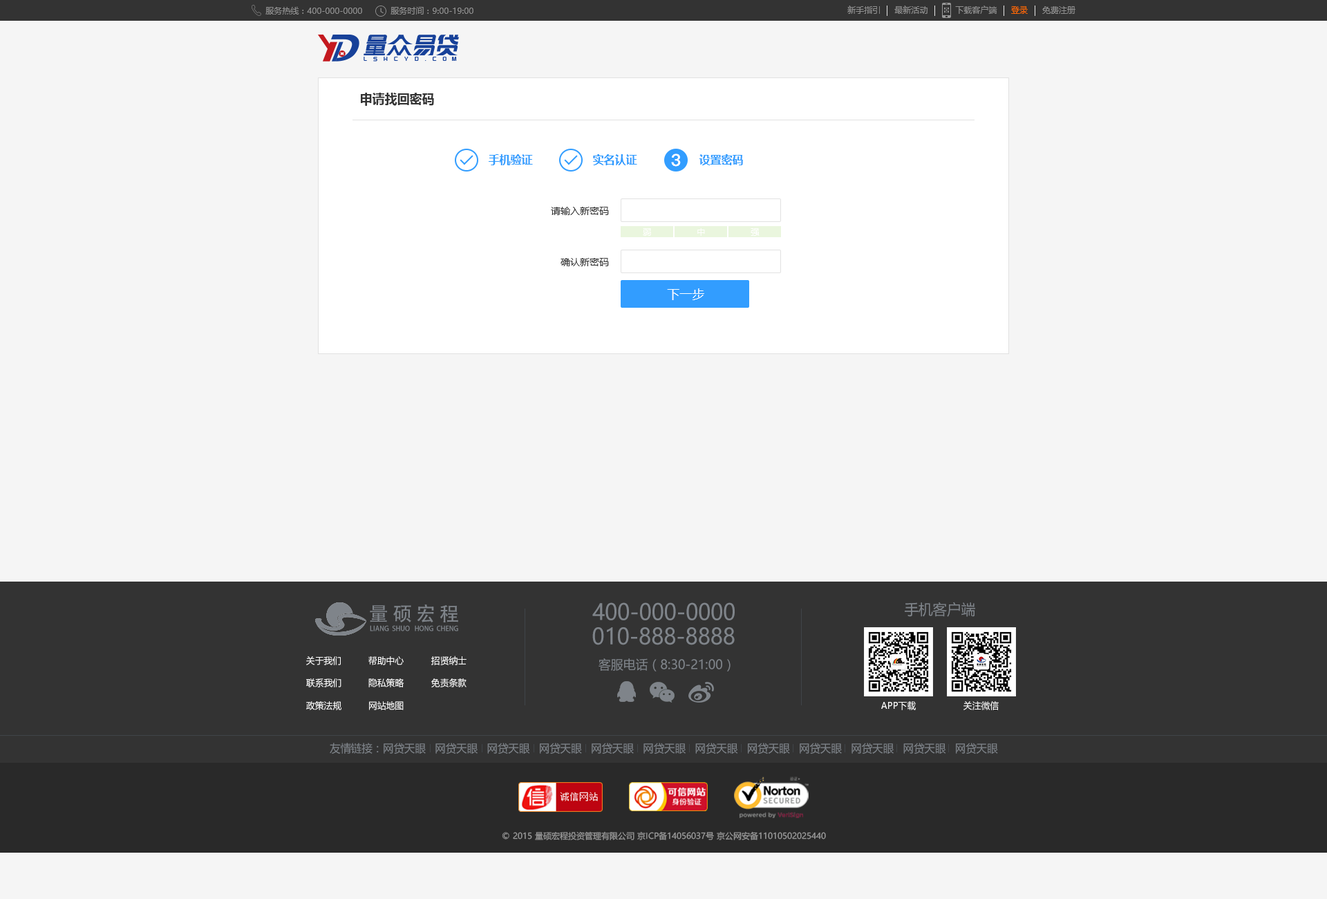
<style>
.page{position:relative;width:1327px;height:899px;background:#f5f5f5}
.page>*{position:absolute;margin:0}
.t1{font:8.3px "MicrosoftYaHei";color:#909090}
.t2{font:8.3px "MicrosoftYaHei";color:#ff6803}
.t3{font:12.4px "MicrosoftYaHei-Bold";color:#333333}
.t4{font:11.1px "MicrosoftYaHei-Bold";color:#329dff}
.t5{font:16.6px "PingFang-SC-Heavy";color:#ffffff}
.t6{font:9.7px "MicrosoftYaHei";color:#333333}
.t7{font:8.3px "MicrosoftYaHei";color:#ffffff}
.t8{font:12.4px "MicrosoftYaHei";color:#ffffff}
.t9{font:19.6px "AdobeHeitiStd-Regular";letter-spacing:0.2em;color:#7f848a}
.t10{font:22.1px "MicrosoftYaHei";color:#7f848a;scale:0.96 1}
.t11{font:14.7px "MicrosoftYaHei";color:#7f848a;scale:0.96 1}
.t12{font:7px "AdobeHeitiStd-Regular";color:#7f848a;text-transform:uppercase;scale:0.96 1}
.t13{font:9.2px "MicrosoftYaHei";color:#ffffff;scale:0.96 1}
.t14{font:12.9px "MicrosoftYaHei";color:#7f848a;scale:0.96 1}
.t15{font:11px "MicrosoftYaHei";color:#7f848a;scale:0.96 1}
.t16{font:8.3px "MicrosoftYaHei";color:#999999}
</style>
<div class="page">
<p class="t1" style="left:847px;top:6px;width:33px;height:8px">新手指引</p>
<p class="t1" style="left:894px;top:6px;width:34px;height:8px">最新活动</p>
<p class="t1" style="left:955px;top:6px;width:42px;height:8px">下载客户端</p>
<p class="t1" style="left:265px;top:7px;width:97px;height:8px">服务热线：400-000-0000</p>
<p class="t1" style="left:391px;top:7px;width:82px;height:8px">服务时间：9:00-19:00</p>
<p class="t2" style="left:1011px;top:6px;width:17px;height:8px">登录</p>
<p class="t1" style="left:1042px;top:6px;width:33px;height:8px">免费注册</p>
<p class="t3" style="left:361px;top:93px;width:73px;height:13px">申请找回密码</p>
<p class="t4" style="left:489px;top:154px;width:44px;height:11px">手机验证</p>
<p class="t4" style="left:593px;top:154px;width:44px;height:11px">实名认证</p>
<p class="t5" style="left:671px;top:153px;width:10px;height:14px">3</p>
<p class="t4" style="left:699px;top:154px;width:44px;height:11px">设置密码</p>
<p class="t6" style="left:551px;top:207px;width:58px;height:8px">请输入新密码</p>
<p class="t7" style="left:643px;top:228px;width:8px;height:8px">弱</p>
<p class="t7" style="left:697px;top:228px;width:8px;height:8px">中</p>
<p class="t7" style="left:751px;top:228px;width:9px;height:8px">强</p>
<p class="t6" style="left:561px;top:258px;width:48px;height:8px">确认新密码</p>
<p class="t8" style="left:667px;top:288px;width:37px;height:12px">下一步</p>
<p class="t9" style="left:370px;top:604px;width:88px;height:18px">量硕宏程</p>
<p class="t10" style="left:592px;top:602px;width:143px;height:18px">400-000-0000</p>
<p class="t11" style="left:905px;top:601px;width:70px;height:16px">手机客户端</p>
<p class="t12" style="left:370px;top:625px;width:88px;height:6px">Liang  Shuo   Hong  Cheng</p>
<p class="t10" style="left:592px;top:627px;width:143px;height:18px">010-888-8888</p>
<p class="t13" style="left:306px;top:656px;width:35px;height:9px">关于我们</p>
<p class="t13" style="left:368px;top:656px;width:36px;height:9px">帮助中心</p>
<p class="t13" style="left:431px;top:655px;width:36px;height:10px">招贤纳士</p>
<p class="t14" style="left:599px;top:658px;width:132px;height:13px">客服电话（8:30-21:00）</p>
<p class="t13" style="left:306px;top:678px;width:35px;height:9px">联系我们</p>
<p class="t13" style="left:368px;top:678px;width:36px;height:9px">隐私策略</p>
<p class="t13" style="left:431px;top:678px;width:36px;height:9px">免责条款</p>
<p class="t13" style="left:306px;top:701px;width:35px;height:9px">政策法规</p>
<p class="t13" style="left:369px;top:701px;width:35px;height:9px">网站地图</p>
<p class="t13" style="left:881px;top:701px;width:35px;height:9px">APP下载</p>
<p class="t13" style="left:964px;top:701px;width:35px;height:9px">关注微信</p>
<p class="t15" style="left:330px;top:742px;width:668px;height:11px">友情链接：网贷天眼   网贷天眼   网贷天眼   网贷天眼   网贷天眼   网贷天眼   网贷天眼   网贷天眼   网贷天眼   网贷天眼   网贷天眼   网贷天眼</p>
<p class="t16" style="left:502px;top:831px;width:324px;height:9px">© 2015 量硕宏程投资管理有限公司 京ICP备14056037号 京公网安备11010502025440</p>
</div>
